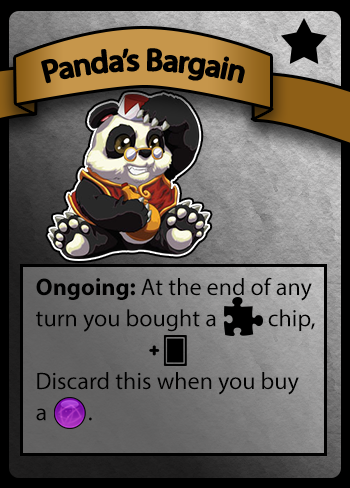
<style>
.page{position:relative;width:350px;height:488px}
.page>*{position:absolute;margin:0}
.t1{font:30px "MyriadPro-Regular";color:#000000}
.t2{font:24px "MyriadPro-Regular";color:#000000}
.t3{font:24px "MyriadPro-Bold";color:#000000}
</style>
<div class="page">
<p class="t1" style="left:42px;top:49px;width:202px;height:34px">Panda’s Bargain</p>
<p class="t2" style="left:36px;top:277px;width:279px;height:144px"><span class="t3">Ongoing:</span> At the end of any<br>turn you bought a          chip,<br><br>Discard this when you buy<br>a        .</p>
</div>
